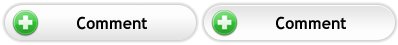
<style>
.page{position:relative;width:398px;height:45px}
.page>*{position:absolute;margin:0}
.t1{font:16.8px "TrebuchetMS-Bold";color:#000000;scale:0.95 1}
</style>
<div class="page">
<p class="t1" style="left:77px;top:16px;width:70px;height:14px">Comment</p>
<p class="t1" style="left:276px;top:16px;width:70px;height:14px">Comment</p>
</div>
